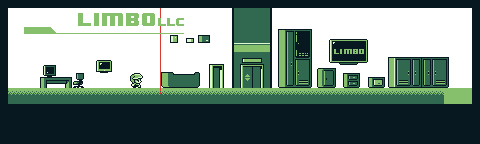
<style>
.page{position:relative;width:480px;height:144px;background:#071821}
.page>*{position:absolute;margin:0}
.t1{font:16px "8BITWONDERNominal";color:#86c06c;text-transform:uppercase}
.t2{font:9px "8BITWONDERNominal";color:#86c06c;text-transform:uppercase}
.t3{font:6px "8BITWONDERNominal";color:#86c06c;text-transform:uppercase}
</style>
<div class="page">
<p class="t1" style="left:78px;top:13px;width:106px;height:13px">limbo<span class="t2">llc</span></p>
<p class="t3" style="left:334px;top:49px;width:30px;height:5px">limbo</p>
</div>
